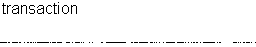
<style>
.page{position:relative;width:256px;height:47px;background:#ffffff}
.page>*{position:absolute;margin:0}
.t1{font:16px "ArialMT";color:#000000}
</style>
<div class="page">
<p class="t1" style="left:2px;top:2px;width:75px;height:12px">transaction</p>
</div>
